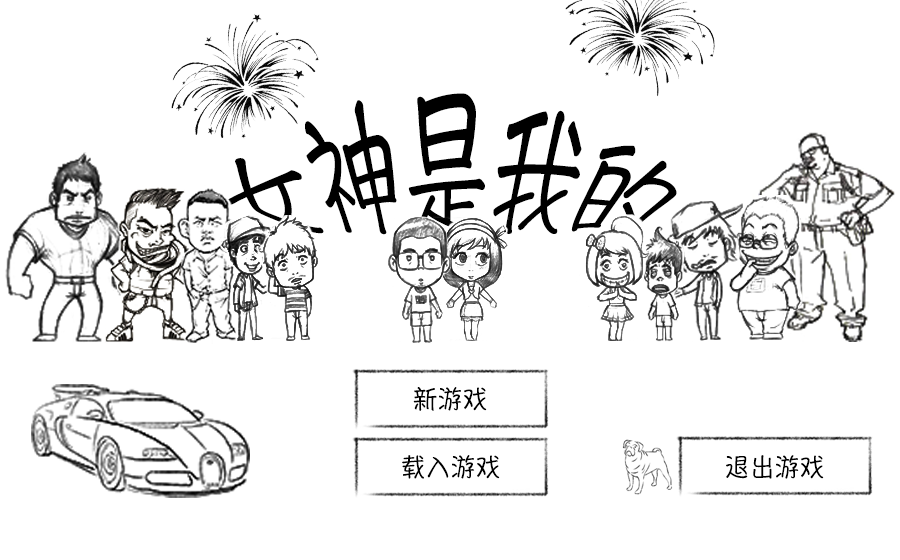
<style>
.page{position:relative;width:900px;height:560px;background:#ffffff}
.page>*{position:absolute;margin:0}
.t1{font:75px "-lfzbbaa";color:#000000}
.t2{font:25px "-lfzbbaa";color:#000000}
</style>
<div class="page">
<p class="t1" style="left:223px;top:93px;width:454px;height:142px">女神是我的</p>
<p class="t2" style="left:413px;top:387px;width:74px;height:24px">新游戏</p>
<p class="t2" style="left:402px;top:455px;width:98px;height:24px">载入游戏</p>
<p class="t2" style="left:726px;top:455px;width:98px;height:24px">退出游戏</p>
</div>
